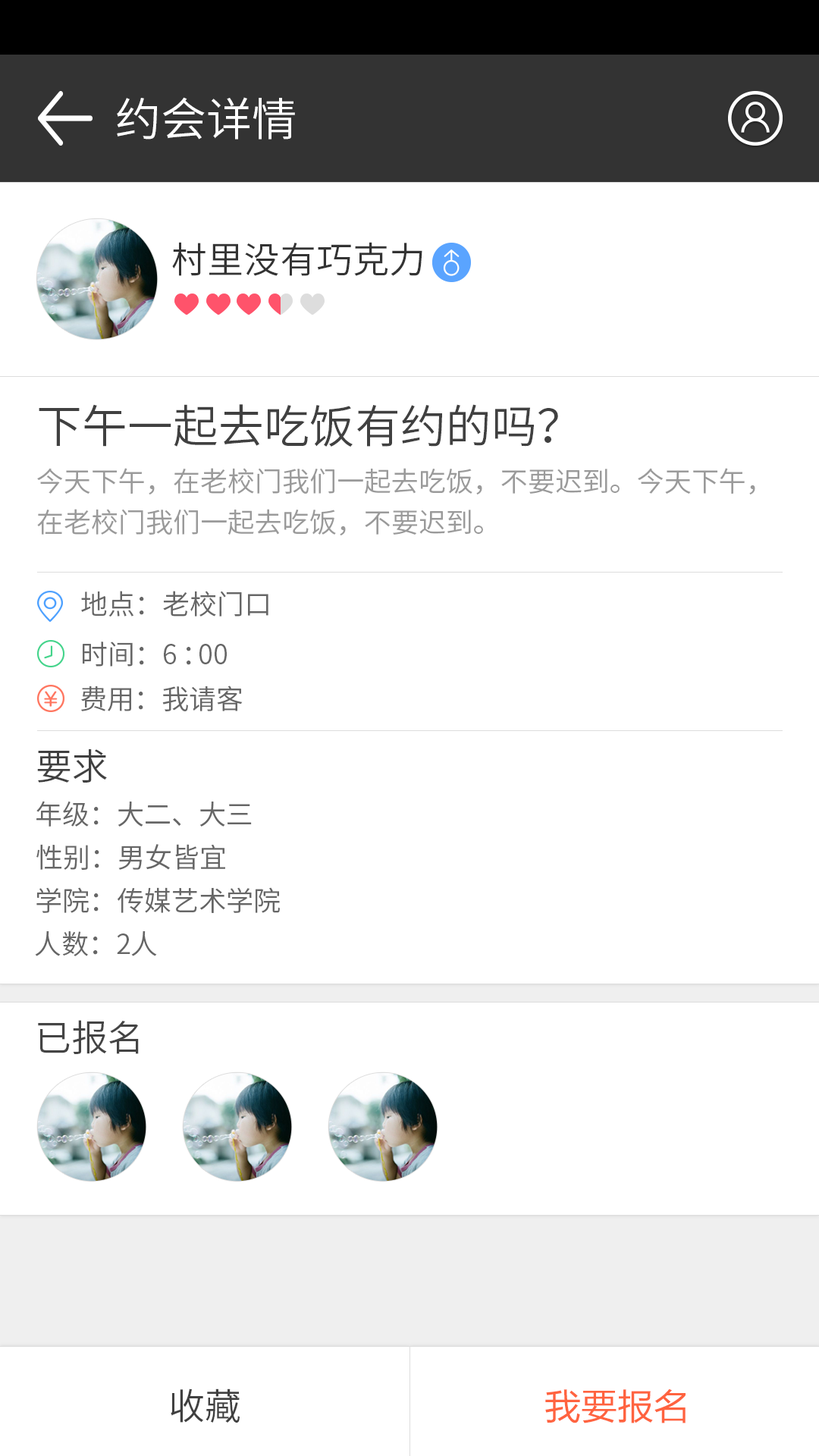
<style>
.page{position:relative;width:819px;height:1456px;background:#ffffff}
.page>*{position:absolute;margin:0}
.t1{font:45.5px "NotoSansHans-DemiLight";color:#ffffff}
.t2{font:36.4px "NotoSansHans-DemiLight";color:#333333}
.t3{font:45.5px "NotoSansHans-DemiLight";color:#404040}
.t4{font:27.3px/13.6px "NotoSansHans-DemiLight";color:#9a9a9a}
.t5{font:27.3px "NotoSansHans-DemiLight";color:#666666}
.t6{font:36.4px "NotoSansHans-DemiLight";color:#404040}
.t7{font:36.4px "NotoSansHans-DemiLight";color:#444444}
.t8{font:36.4px "FZLTHK--GBK1-0";color:#ff633f}
</style>
<div class="page">
<p class="t1" style="left:117px;top:97px;width:178px;height:43px">约会详情</p>
<p class="t2" style="left:172px;top:242px;width:250px;height:34px">村里没有巧克力</p>
<p class="t3" style="left:39px;top:404px;width:519px;height:43px">下午一起去吃饭有约的吗？</p>
<p class="t4" style="left:37px;top:468px;width:718px;height:67px">今天下午，在老校门我们一起去吃饭，不要迟到。今天下午，<br><br><br>在老校门我们一起去吃饭，不要迟到。</p>
<p class="t5" style="left:81px;top:591px;width:187px;height:26px">地点：老校门口</p>
<p class="t5" style="left:83px;top:642px;width:144px;height:25px">时间：6：00</p>
<p class="t5" style="left:81px;top:686px;width:162px;height:25px">费用：我请客</p>
<p class="t6" style="left:37px;top:749px;width:70px;height:34px">要求</p>
<p class="t5" style="left:36px;top:801px;width:216px;height:26px">年级：大二、大三</p>
<p class="t5" style="left:36px;top:844px;width:189px;height:26px">性别：男女皆宜</p>
<p class="t5" style="left:36px;top:887px;width:244px;height:26px">学院：传媒艺术学院</p>
<p class="t5" style="left:35px;top:931px;width:122px;height:25px">人数：2人</p>
<p class="t7" style="left:38px;top:1020px;width:101px;height:34px">已报名</p>
<p class="t6" style="left:171px;top:1388px;width:69px;height:35px">收藏</p>
<p class="t8" style="left:545px;top:1388px;width:141px;height:35px">我要报名</p>
</div>
